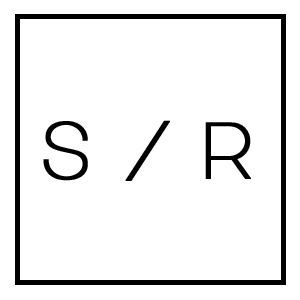
<style>
.page{position:relative;width:300px;height:300px;background:#ffffff}
.page>*{position:absolute;margin:0}
.t1{font:80px "MajorMonoDisplay-Regular";color:#000000;font-weight:bold}
</style>
<div class="page">
<p class="t1" style="left:43px;top:121px;width:45px;height:60px">s</p>
<p class="t1" style="left:125px;top:120px;width:45px;height:61px">/</p>
<p class="t1" style="left:205px;top:122px;width:46px;height:57px">r</p>
</div>
